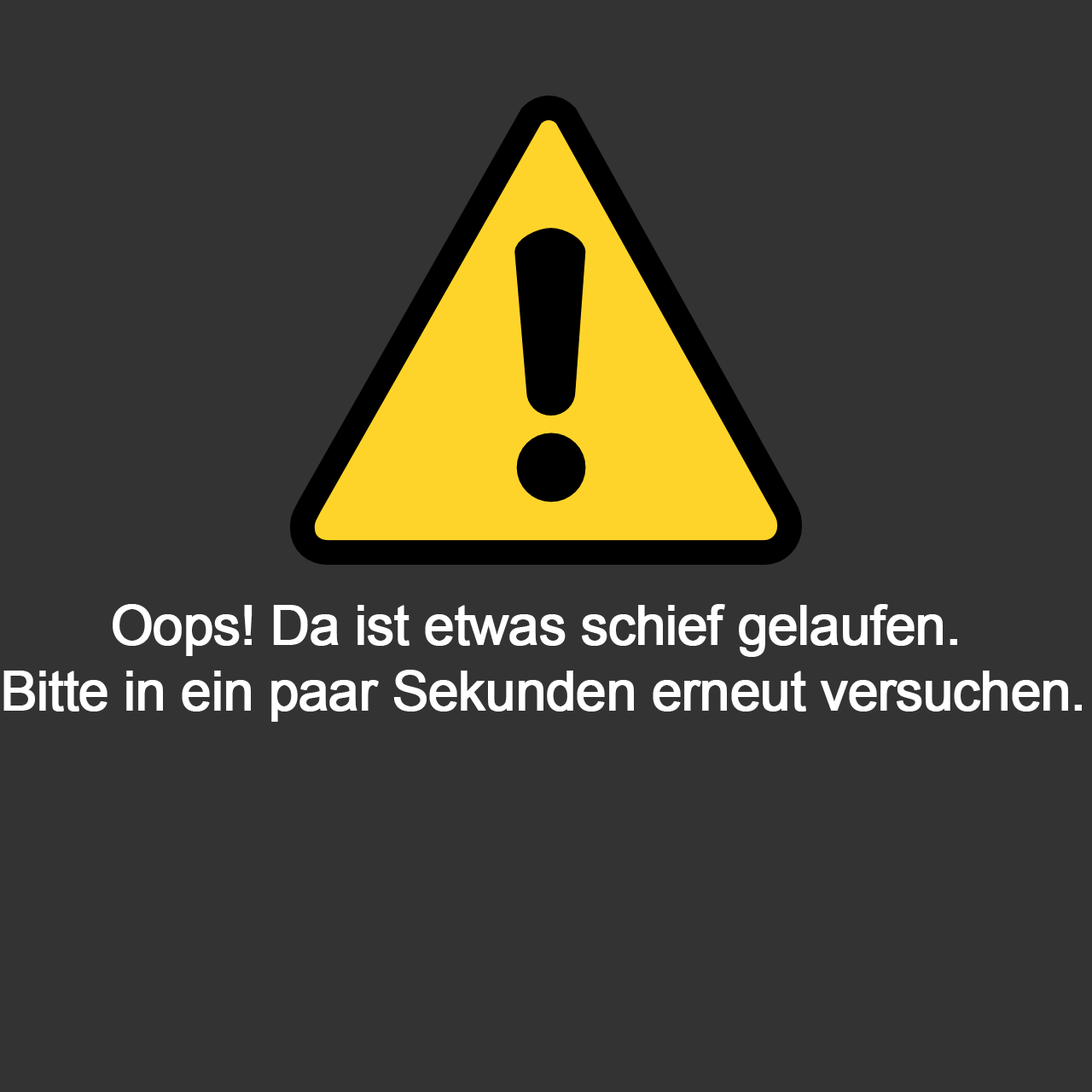
<style>
.page{position:relative;width:1092px;height:1092px;background:#333333}
.page>*{position:absolute;margin:0}
.t1{font:54.6px "ArialMT";letter-spacing:-0.03em;color:#ffffff;font-weight:bold}
</style>
<div class="page">
<p class="t1" style="left:3px;top:604px;width:1079px;height:118px;text-align:center">Oops! Da ist etwas schief gelaufen. <br>Bitte in ein paar Sekunden erneut versuchen.</p>
</div>
